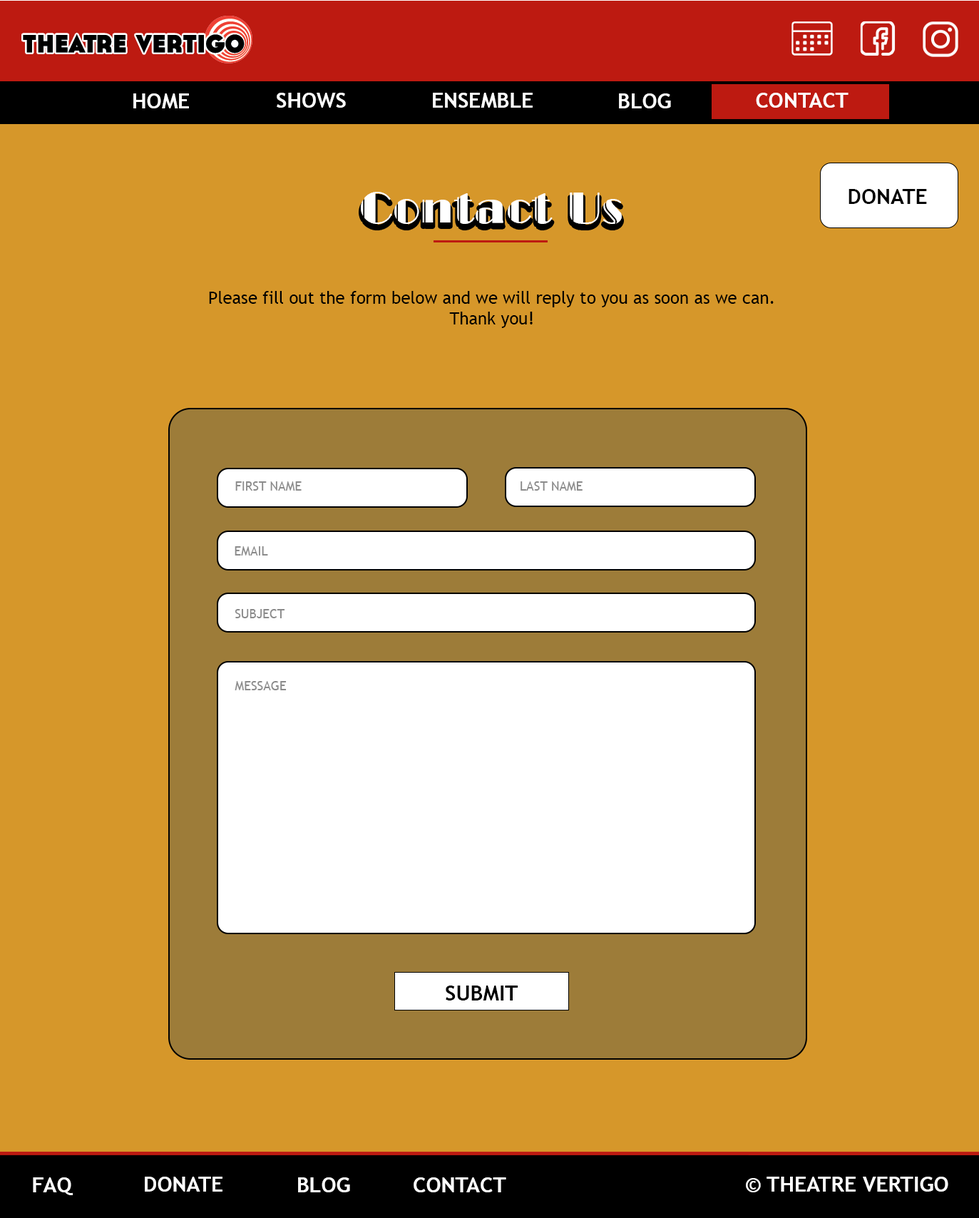
<style>
.page{position:relative;width:979px;height:1218px;background:#d6972a}
.page>*{position:absolute;margin:0}
.t1{font:21.4px "TrebuchetMS-Bold";color:#fefefe;text-transform:uppercase}
.t2{font:42.8px "LTCBroadway-Engraved";color:#ffffff}
.t3{font:21.4px "TrebuchetMS-Bold";color:#000000;text-transform:uppercase}
.t4{font:17.1px "TrebuchetMS";color:#000000}
.t5{font:12.8px "TrebuchetMS";color:#8b8b8b;text-transform:uppercase}
.t6{font:21.4px "TrebuchetMS-Bold";color:#ffffff;text-transform:uppercase}
</style>
<div class="page">
<p class="t1" style="left:133px;top:93px;width:56px;height:15px">Home</p>
<p class="t1" style="left:277px;top:93px;width:69px;height:15px">Shows</p>
<p class="t1" style="left:433px;top:93px;width:100px;height:15px">Ensemble</p>
<p class="t1" style="left:619px;top:93px;width:52px;height:15px">Blog</p>
<p class="t1" style="left:756px;top:93px;width:93px;height:15px">Contact</p>
<p class="t2" style="left:361px;top:192px;width:261px;height:32px">Contact Us</p>
<p class="t3" style="left:849px;top:189px;width:78px;height:15px">Donate</p>
<p class="t4" style="left:209px;top:291px;width:565px;height:37px;text-align:center">Please fill out the form below and we will reply to you as soon as we can.<br>Thank you!</p>
<p class="t5" style="left:235px;top:481px;width:67px;height:10px">First Name</p>
<p class="t5" style="left:521px;top:481px;width:62px;height:10px">last Name</p>
<p class="t5" style="left:235px;top:546px;width:33px;height:9px">Email</p>
<p class="t5" style="left:235px;top:609px;width:50px;height:9px">Subject</p>
<p class="t5" style="left:235px;top:681px;width:52px;height:9px">Message</p>
<p class="t3" style="left:446px;top:985px;width:72px;height:15px">Submit</p>
<p class="t6" style="left:33px;top:1177px;width:40px;height:18px">FAQ</p>
<p class="t6" style="left:145px;top:1177px;width:77px;height:15px">Donate</p>
<p class="t6" style="left:298px;top:1177px;width:52px;height:15px">Blog</p>
<p class="t6" style="left:414px;top:1177px;width:92px;height:15px">Contact</p>
<p class="t6" style="left:746px;top:1177px;width:202px;height:15px">© Theatre Vertigo</p>
</div>
